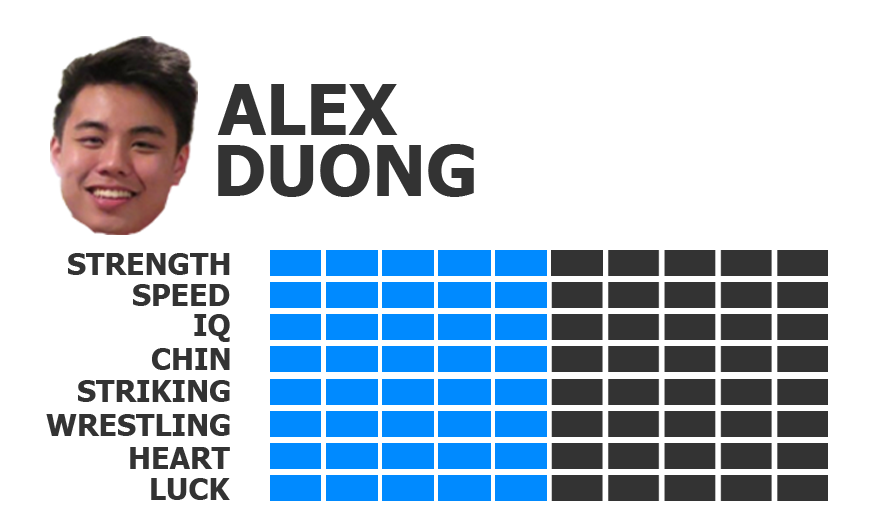
<style>
.page{position:relative;width:884px;height:526px;background:#ffffff}
.page>*{position:absolute;margin:0}
.t1{font:70px "Tahoma-Bold";color:#333333}
.t2{font:30px "Tahoma-Bold";color:#333333}
</style>
<div class="page">
<p class="t1" style="left:217px;top:84px;width:181px;height:51px">ALEX</p>
<p class="t1" style="left:218px;top:144px;width:256px;height:53px">DUONG</p>
<p class="t2" style="left:68px;top:253px;width:162px;height:22px">STRENGTH</p>
<p class="t2" style="left:133px;top:284px;width:97px;height:22px">SPEED</p>
<p class="t2" style="left:194px;top:314px;width:36px;height:28px">IQ</p>
<p class="t2" style="left:152px;top:348px;width:78px;height:22px">CHIN</p>
<p class="t2" style="left:78px;top:380px;width:152px;height:22px">STRIKING</p>
<p class="t2" style="left:46px;top:414px;width:184px;height:22px">WRESTLING</p>
<p class="t2" style="left:130px;top:447px;width:100px;height:22px">HEART</p>
<p class="t2" style="left:151px;top:478px;width:79px;height:22px">LUCK</p>
</div>
